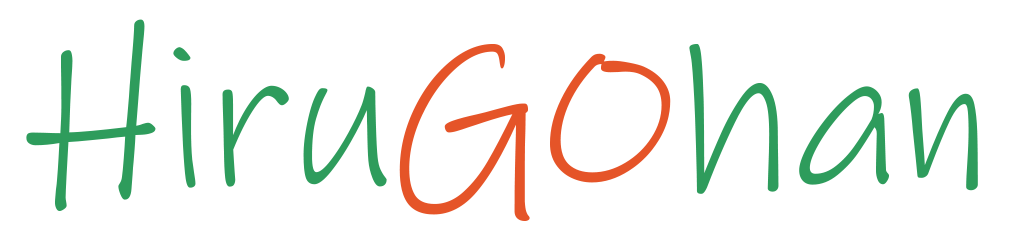
<style>
.page{position:relative;width:1015px;height:240px;background:#ffffff}
.page>*{position:absolute;margin:0}
.t1{font:200px "InkFree";color:#2e9c5c}
.t2{font:200px "InkFree";color:#e55428}
</style>
<div class="page">
<p class="t1" style="left:26px;top:19px;width:952px;height:202px">Hiru<span class="t2">GO</span>han</p>
</div>
